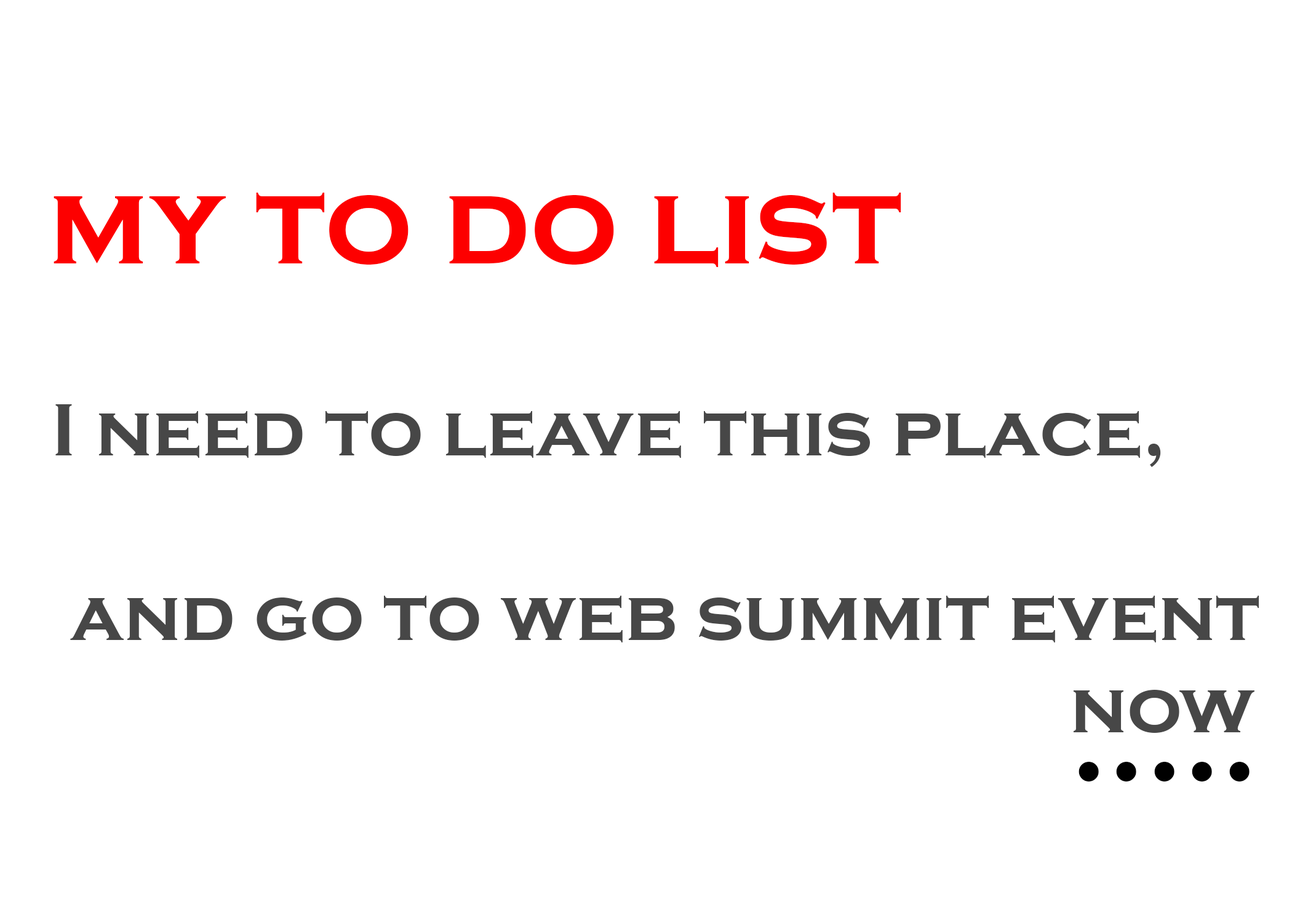
<style>
.page{position:relative;width:1292px;height:923px;background:#ffffff}
.page>*{position:absolute;margin:0}
.t1{font:123.1px "CopperplateGothic-Bold";color:#fd0000}
.t2{font:76.9px "CopperplateGothic-Bold";color:#474747}
.t3{font:123.1px "CopperplateGothic-Bold";color:#000000}
</style>
<div class="page">
<p class="t1" style="left:54px;top:193px;width:847px;height:74px">my to do list</p>
<p class="t2" style="left:55px;top:404px;width:1204px;height:329px">I need to leave this place,<br><br> and go to web summit event                                                    now</p>
<p class="t3" style="left:1079px;top:762px;width:171px;height:19px"><span class="t1"><br></span>.....</p>
</div>
